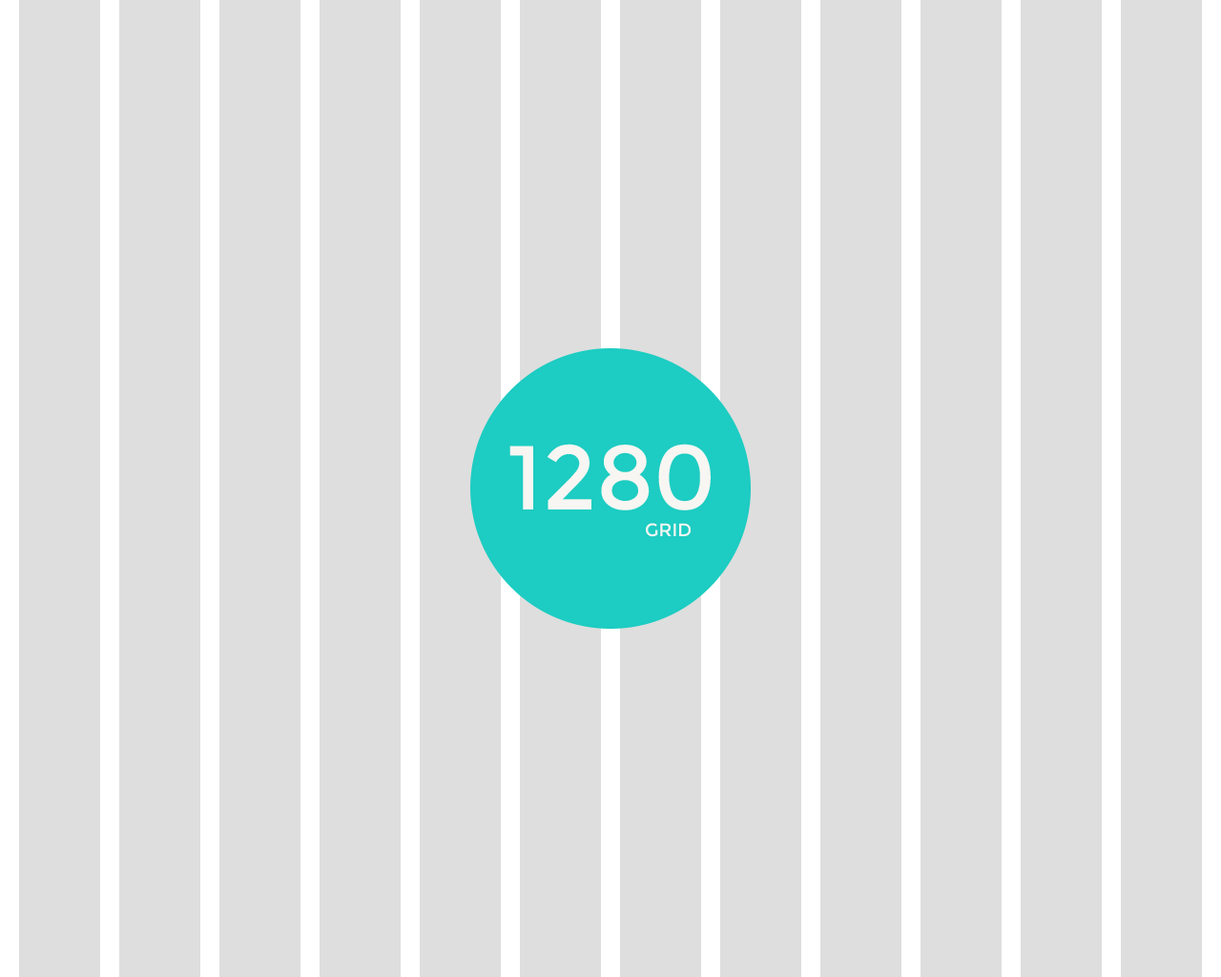
<style>
.page{position:relative;width:1221px;height:977px;background:#dedede}
.page>*{position:absolute;margin:0}
.t1{font:90.9px "Montserrat-Regular";color:#f7f6f2}
.t2{font:18.2px "Montserrat-Regular";color:#f7f6f2}
</style>
<div class="page">
<p class="t1" style="left:509px;top:444px;width:202px;height:66px">1280</p>
<p class="t2" style="left:646px;top:523px;width:45px;height:14px">GRID</p>
</div>
